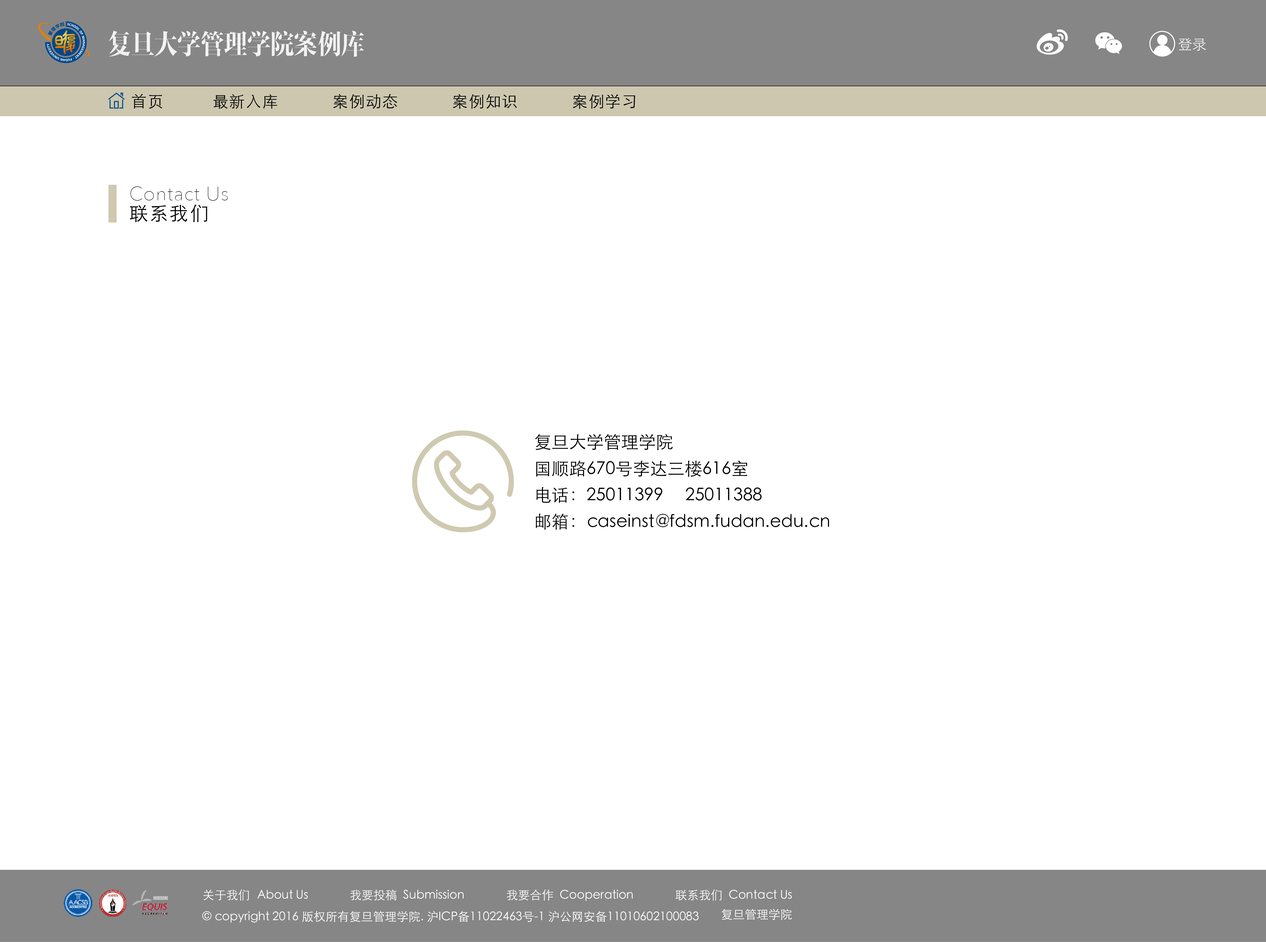
<style>
.page{position:relative;width:1266px;height:942px;background:#ffffff}
.page>*{position:absolute;margin:0}
.t1{font:27.8px "FZFYSJW--GB1-0";letter-spacing:-0.02em;color:#f2f2f2;scale:0.86 1}
.t2{font:14.3px "STXihei";color:#efefef}
.t3{font:15.7px "STHeitiSC-Light";letter-spacing:0.06em;color:#000000}
.t4{font:18.9px/20px "AvenirNext-UltraLight";letter-spacing:0.04em;color:#000000}
.t5{font:18.9px/20px "STHeitiSC-Light";letter-spacing:0.06em;color:#000000}
.t6{font:17.4px/26.6px "STXihei";color:#010101}
.t7{font:11.9px "STXihei";color:#ffffff}
</style>
<div class="page">
<p class="t1" style="left:109px;top:31px;width:255px;height:26px">复旦大学管理学院案例库</p>
<p class="t2" style="left:1179px;top:38px;width:27px;height:13px">登录</p>
<p class="t3" style="left:132px;top:94px;width:30px;height:15px">首页</p>
<p class="t3" style="left:213px;top:94px;width:422px;height:15px">最新入库           案例动态           案例知识           案例学习</p>
<p class="t4" style="left:130px;top:186px;width:98px;height:36px">Contact Us<br><span class="t5">联系我们</span></p>
<p class="t6" style="left:535px;top:434px;width:294px;height:96px">复旦大学管理学院<br>国顺路670号李达三楼616室<br>电话：25011399     25011388<br>邮箱：caseinst@fdsm.fudan.edu.cn</p>
<p class="t7" style="left:203px;top:889px;width:589px;height:12px">关于我们   About Us              我要投稿  Submission              我要合作  Cooperation              联系我们  Contact Us</p>
<p class="t7" style="left:202px;top:911px;width:497px;height:11px">© copyright 2016 版权所有复旦管理学院. 沪ICP备11022463号-1 沪公网安备11010602100083</p>
<p class="t7" style="left:721px;top:909px;width:71px;height:11px">复旦管理学院</p>
</div>
